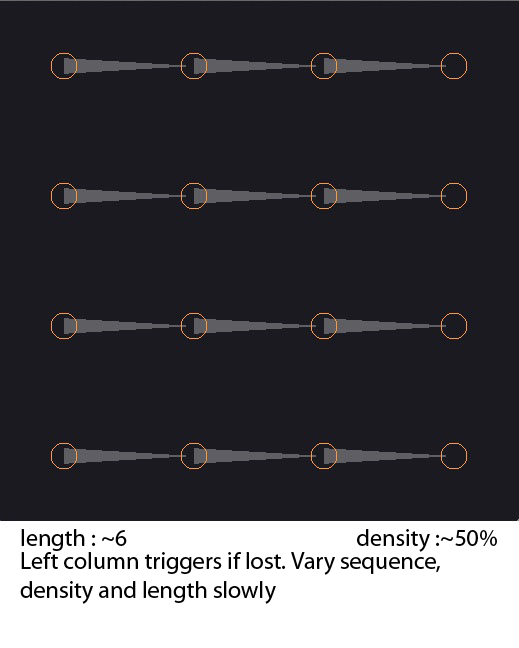
<style>
.page{position:relative;width:519px;height:648px;background:#1b1a20}
.page>*{position:absolute;margin:0}
.t1{font:24px "MyriadPro-Regular";color:#000000}
</style>
<div class="page">
<p class="t1" style="left:21px;top:529px;width:476px;height:23px">length : ~6                                             density :~50%</p>
<p class="t1" style="left:20px;top:552px;width:420px;height:52px">Left column triggers if lost. Vary sequence, <br>density and length slowly</p>
</div>
